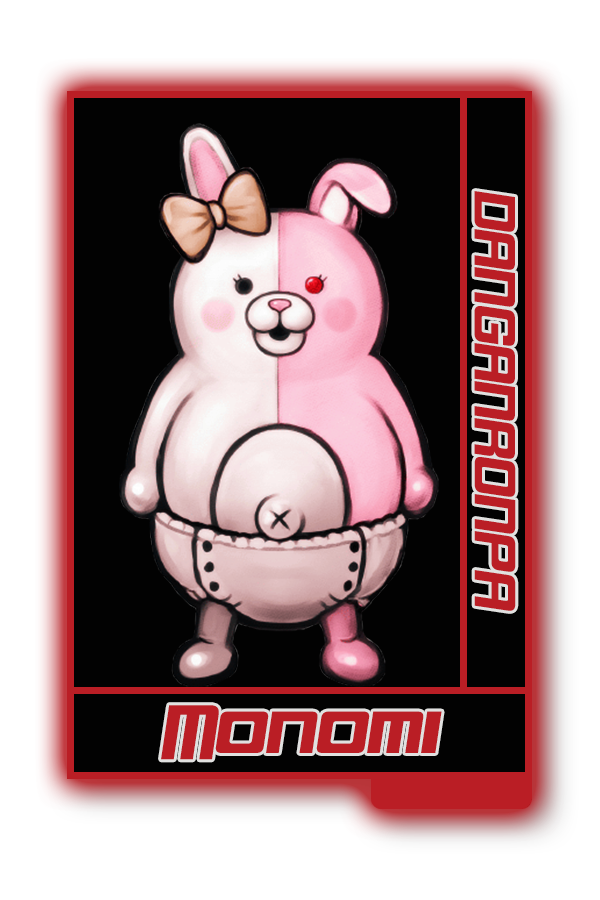
<style>
.page{position:relative;width:600px;height:900px;background:#020202}
.page>*{position:absolute;margin:0}
.t1{font:48.8px "DorBlue";color:#bb2c2e}
.t2{font:65.2px "DorBlue";color:#bb2c2e}
</style>
<div class="page">
<p class="t1" style="left:474px;top:191px;width:42px;height:420px;rotate:90deg">DANGANRONPA</p>
<p class="t2" style="left:161px;top:705px;width:281px;height:55px">Monomi</p>
</div>
